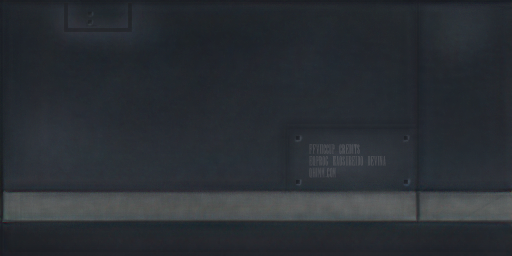
<style>
.page{position:relative;width:512px;height:256px}
.page>*{position:absolute;margin:0}
.t1{font:9.8px "New";color:#424449}
.t2{font:9.8px "MyriadPro-Regular";color:#424449}
</style>
<div class="page">
<p class="t1" style="left:309px;top:144px;width:77px;height:34px">FFVIICCUP CREDITS<br>EQPROG KAOSUREIDO DEVINA<br>QHIMM<span class="t2">.</span>COM</p>
</div>
